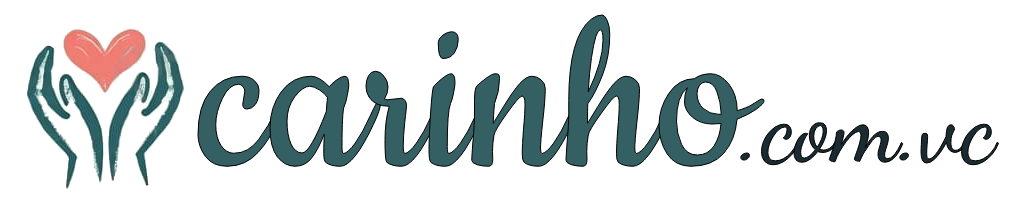
<style>
.page{position:relative;width:1024px;height:219px;background:#ffffff}
.page>*{position:absolute;margin:0}
.t1{font:250px "Cookie-Regular";color:#346063}
.t2{font:103px "DancingScript-Regular";color:#1a2b32}
</style>
<div class="page">
<p class="t1" style="left:197px;top:14px;width:568px;height:154px">carinho</p>
<p class="t2" style="left:739px;top:121px;width:261px;height:45px">.com.vc</p>
</div>
